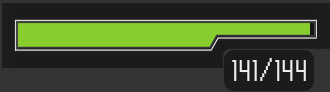
<style>
.page{position:relative;width:330px;height:92px;background:#1b1b1b}
.page>*{position:absolute;margin:0}
.t1{font:30px "Mecha";color:#eeecec}
</style>
<div class="page">
<p class="t1" style="left:232px;top:58px;width:74px;height:23px">141/144</p>
</div>
